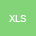
<style>
.page{position:relative;width:36px;height:36px;background:#83d479}
.page>*{position:absolute;margin:0}
.t1{font:9px "ArialMT";color:#ffffff}
</style>
<div class="page">
<p class="t1" style="left:9px;top:15px;width:17px;height:7px">XLS</p>
</div>
